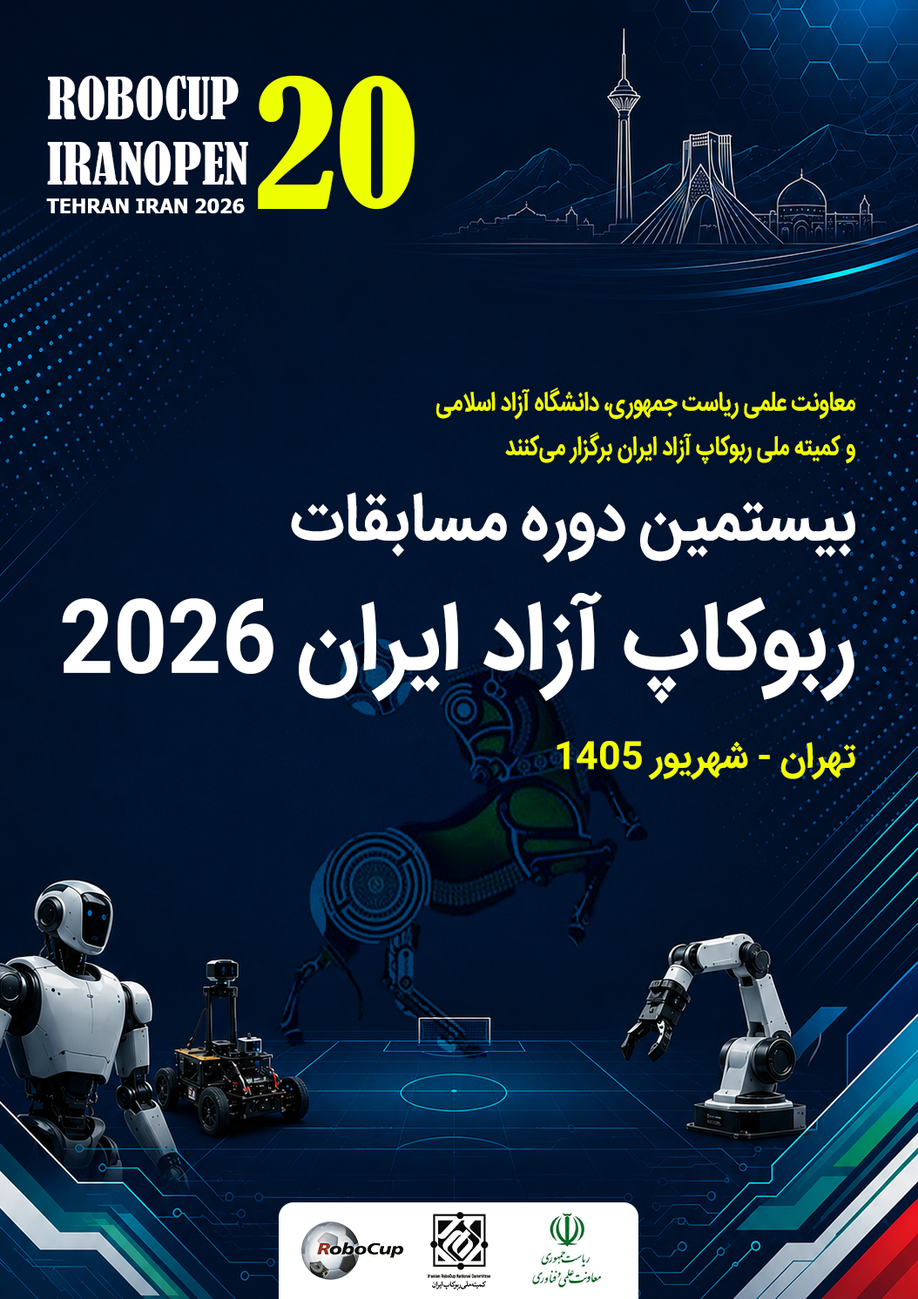
<style>
.page{position:relative;width:918px;height:1299px}
.page>*{position:absolute;margin:0}
.t1{font:54.2px "BernardMT-Condensed";color:#ffffff}
.t2{font:167.2px "BernardMT-Condensed";color:#edff00}
.t3{font:19.8px "Tahoma-Bold";color:#ffffff}
.t4{font:26.7px/43.8px "IRANSans-Bold";color:#f2ff00;scale:0.79 1}
.t5{font:67.4px "IRANSans-Bold";color:#ffffff;scale:0.92 1}
.t6{font:95.8px "IRANSans-Bold";color:#ffffff;scale:0.92 1}
.t7{font:36.1px "IRANSans-Bold";color:#f2ff00}
</style>
<div class="page">
<p class="t1" style="left:47px;top:76px;width:201px;height:109px">ROBOCUP <br>IRANOPEN</p>
<p class="t2" style="left:258px;top:76px;width:156px;height:133px">20</p>
<p class="t3" style="left:46px;top:199px;width:199px;height:14px">TEHRAN IRAN 2026</p>
<p class="t4" style="left:436px;top:388px;width:419px;height:77px;text-align:right">معاونت علمی ریاست جمهوری، دانشگاه آزاد اسلامی<br> و کمیته ملی ربوکاپ آزاد ایران برگزار می‌کنند</p>
<p class="t5" style="left:291px;top:492px;width:564px;height:71px">بیستمین دوره مسابقات</p>
<p class="t6" style="left:62px;top:591px;width:792px;height:113px">ربوکاپ آزاد ایران 2026</p>
<p class="t7" style="left:556px;top:741px;width:300px;height:39px">تهران - شهریور 1405</p>
</div>
